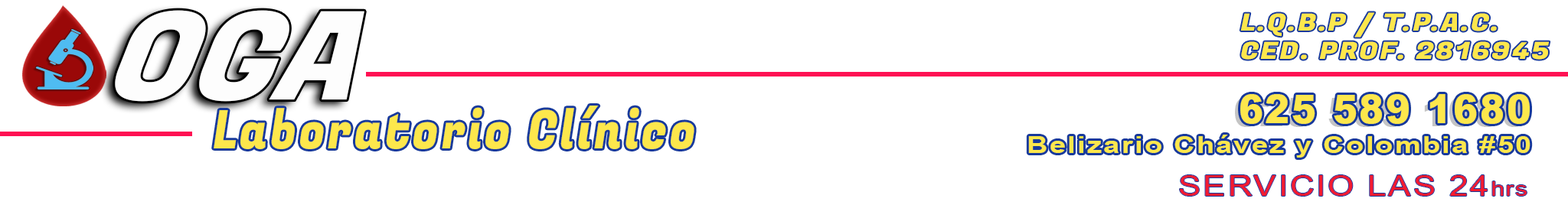
<style>
.page{position:relative;width:1568px;height:205px;background:#ffffff}
.page>*{position:absolute;margin:0}
.t1{font:122.9px "FugazOne-Regular";letter-spacing:-0.02em;color:#fdfdfd;font-style:italic;scale:1.07 1}
.t2{font:23.7px "FugazOne-Regular";letter-spacing:0.06em;color:#fde74c;scale:1.21 1}
.t3{font:39.6px "Arial-Black";letter-spacing:0.06em;color:#fde74c;scale:0.92 1}
.t4{font:53.2px "FugazOne-Regular";letter-spacing:0.06em;color:#fde74c;scale:0.86 1}
.t5{font:24.1px "Arial-BoldMT";letter-spacing:0.06em;color:#fde74c;scale:1.21 1}
.t6{font:28.1px "ArialMT";letter-spacing:0.06em;color:#f31b2f;scale:1.21 1}
.t7{font:20px "ArialMT";letter-spacing:0.06em;color:#f31b2f;scale:1.21 1}
</style>
<div class="page">
<p class="t1" style="left:115px;top:10px;width:249px;height:92px">OGA</p>
<p class="t2" style="left:1240px;top:12px;width:310px;height:48px">L.Q.B.P / T.P.A.C.  <br>CED. PROF. 2816945</p>
<p class="t3" style="left:1240px;top:94px;width:290px;height:30px">625 589 1680</p>
<p class="t4" style="left:214px;top:106px;width:480px;height:43px">Laboratorio Clínico</p>
<p class="t5" style="left:1028px;top:135px;width:502px;height:23px">Belizario Chávez y Colombia #50</p>
<p class="t6" style="left:1180px;top:175px;width:347px;height:21px">SERVICIO LAS 24<span class="t7">hrs</span></p>
</div>
